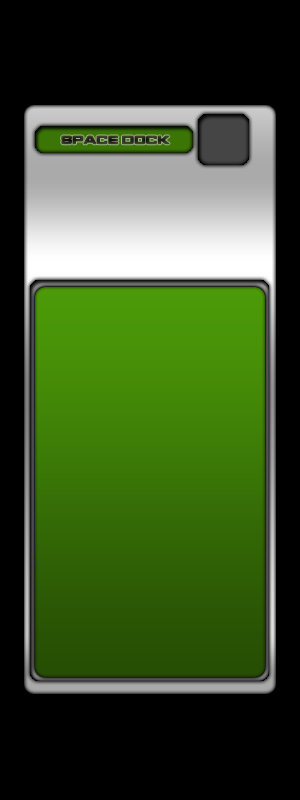
<style>
.page{position:relative;width:300px;height:800px;background:#000000}
.page>*{position:absolute;margin:0}
.t1{font:12px "StarfleetBT-BoldExtended";color:#323225}
</style>
<div class="page">
<p class="t1" style="left:61px;top:135px;width:109px;height:10px">Space dock</p>
</div>
